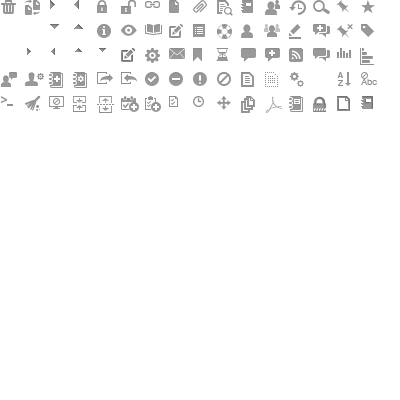
<style>
.page{position:relative;width:400px;height:400px;background:#ffffff}
.page>*{position:absolute;margin:0}
.t1{font:9px "HelveticaNeue";color:#909090}
</style>
<div class="page">
<p class="t1" style="left:361px;top:79px;width:16px;height:6px">Abc</p>
</div>
